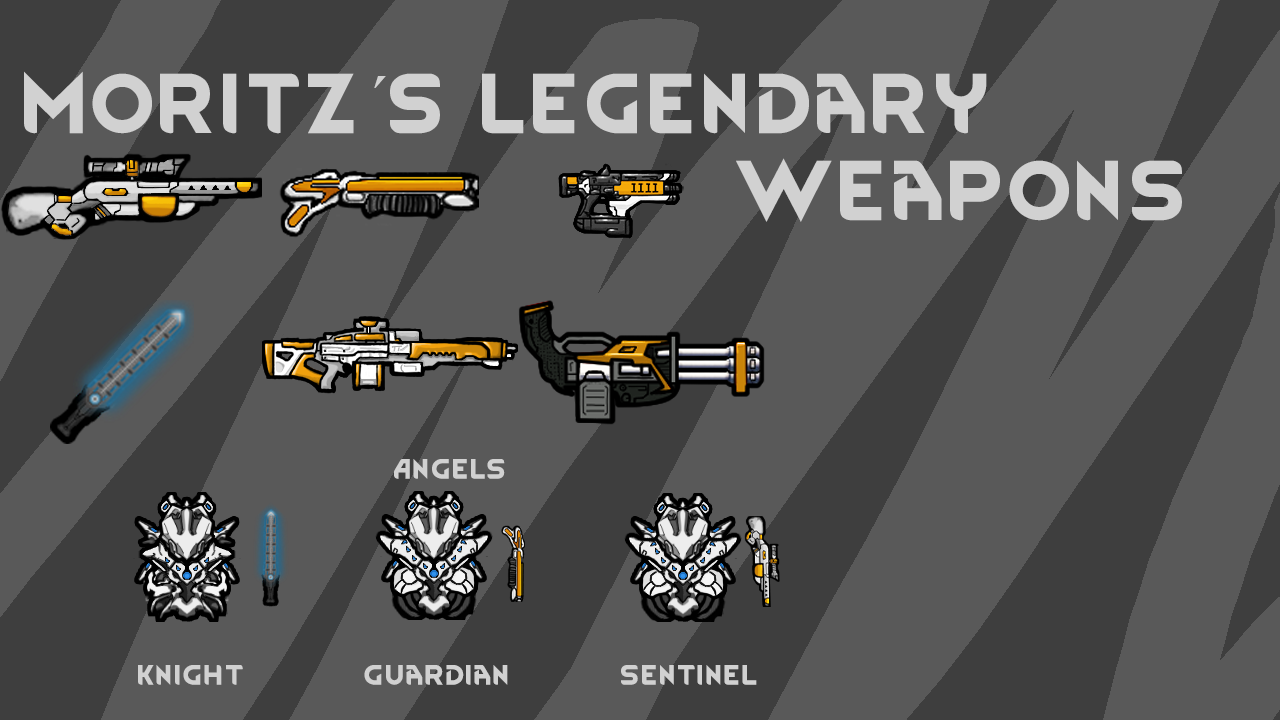
<style>
.page{position:relative;width:1280px;height:720px;background:#595959}
.page>*{position:absolute;margin:0}
.t1{font:72px "RimWordFont";color:#d1d1d1}
.t2{font:72px "TimesNewRomanPSMT";color:#d1d1d1}
.t3{font:24px "RimWordFont";color:#d1d1d1}
</style>
<div class="page">
<p class="t1" style="left:24px;top:71px;width:1158px;height:151px">Moritz<span class="t2">´</span>s Legendary <br>                        Weapons</p>
<p class="t3" style="left:394px;top:459px;width:111px;height:20px">Angels</p>
<p class="t3" style="left:138px;top:665px;width:619px;height:20px">Knight            Guardian           Sentinel</p>
</div>
